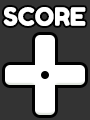
<style>
.page{position:relative;width:90px;height:120px;background:#333333}
.page>*{position:absolute;margin:0}
.t1{font:25px "FredokaOne-Regular";color:#ffffff;text-transform:uppercase}
</style>
<div class="page">
<p class="t1" style="left:3px;top:7px;width:83px;height:19px">Score</p>
</div>
